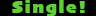
<style>
.page{position:relative;width:96px;height:16px;background:#000000}
.page>*{position:absolute;margin:0}
.t1{font:17.8px "Skia_2.919wght";letter-spacing:0.075em;color:#60cf33;scale:1.03 1}
</style>
<div class="page">
<p class="t1" style="left:12px;top:0px;width:73px;height:17px">Single!</p>
</div>
